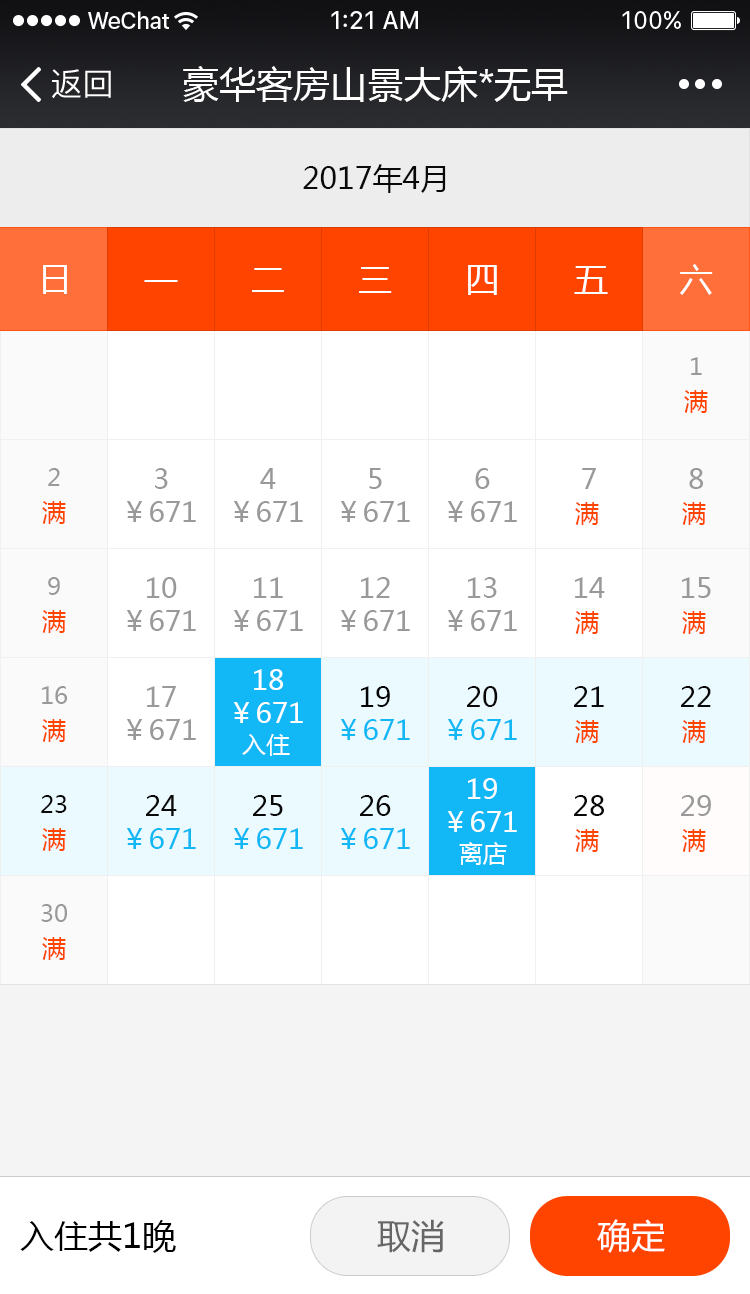
<style>
.page{position:relative;width:750px;height:1294px;background:#ffffff}
.page>*{position:absolute;margin:0}
.t1{font:32px "PingFangSC-Regular";color:#ffffff}
.t2{font:37px "MicrosoftYaHei";color:#ffffff}
.t3{font:30px "MicrosoftYaHei";color:#090909}
.t4{font:34px "MicrosoftYaHei";color:#ffffff}
.t5{font:24px "MicrosoftYaHei";color:#999999}
.t6{font:24px "MicrosoftYaHei";color:#ff4400}
.t7{font:28px "MicrosoftYaHei";color:#999999}
.t8{font:28px "MicrosoftYaHei";color:#ffffff}
.t9{font:28px "MicrosoftYaHei";color:#040404}
.t10{font:28px "MicrosoftYaHei";color:#090909}
.t11{font:28px "MicrosoftYaHei";color:#12b7f5}
.t12{font:24px "MicrosoftYaHei";color:#ffffff}
.t13{font:24px "MicrosoftYaHei";color:#090909}
.t14{font:34px "MicrosoftYaHei";color:#000000}
.t15{font:34px "MicrosoftYaHei";color:#666666}
</style>
<div class="page">
<p class="t1" style="left:52px;top:69px;width:59px;height:30px">返回</p>
<p class="t2" style="left:183px;top:66px;width:385px;height:36px">豪华客房山景大床*无早</p>
<p class="t3" style="left:303px;top:164px;width:143px;height:29px">2017年4月</p>
<p class="t4" style="left:43px;top:265px;width:24px;height:29px">日</p>
<p class="t4" style="left:252px;top:268px;width:32px;height:24px">二</p>
<p class="t4" style="left:359px;top:267px;width:33px;height:26px">三</p>
<p class="t4" style="left:468px;top:265px;width:29px;height:30px">四</p>
<p class="t4" style="left:574px;top:266px;width:34px;height:28px">五</p>
<p class="t4" style="left:680px;top:264px;width:33px;height:31px">六</p>
<p class="t4" style="left:144px;top:280px;width:34px;height:2px">一</p>
<p class="t5" style="left:691px;top:357px;width:11px;height:18px">1</p>
<p class="t6" style="left:684px;top:390px;width:24px;height:23px">满</p>
<p class="t5" style="left:48px;top:468px;width:12px;height:18px">2</p>
<p class="t7" style="left:155px;top:468px;width:13px;height:21px">3</p>
<p class="t7" style="left:260px;top:468px;width:16px;height:21px">4</p>
<p class="t7" style="left:369px;top:468px;width:13px;height:21px">5</p>
<p class="t7" style="left:475px;top:468px;width:15px;height:21px">6</p>
<p class="t7" style="left:582px;top:468px;width:14px;height:21px">7</p>
<p class="t7" style="left:689px;top:468px;width:14px;height:21px">8</p>
<p class="t6" style="left:42px;top:501px;width:24px;height:23px">满</p>
<p class="t7" style="left:126px;top:501px;width:70px;height:21px">￥671</p>
<p class="t7" style="left:233px;top:501px;width:70px;height:21px">￥671</p>
<p class="t7" style="left:340px;top:501px;width:70px;height:21px">￥671</p>
<p class="t7" style="left:447px;top:501px;width:70px;height:21px">￥671</p>
<p class="t6" style="left:575px;top:502px;width:24px;height:23px">满</p>
<p class="t6" style="left:682px;top:502px;width:24px;height:23px">满</p>
<p class="t5" style="left:48px;top:577px;width:12px;height:18px">9</p>
<p class="t7" style="left:147px;top:577px;width:30px;height:21px">10</p>
<p class="t7" style="left:254px;top:577px;width:29px;height:21px">11</p>
<p class="t7" style="left:361px;top:577px;width:29px;height:21px">12</p>
<p class="t7" style="left:468px;top:577px;width:29px;height:21px">13</p>
<p class="t7" style="left:575px;top:577px;width:30px;height:21px">14</p>
<p class="t7" style="left:682px;top:577px;width:29px;height:21px">15</p>
<p class="t6" style="left:42px;top:610px;width:24px;height:23px">满</p>
<p class="t7" style="left:126px;top:610px;width:70px;height:21px">￥671</p>
<p class="t7" style="left:233px;top:610px;width:70px;height:21px">￥671</p>
<p class="t7" style="left:340px;top:610px;width:70px;height:21px">￥671</p>
<p class="t7" style="left:447px;top:610px;width:70px;height:21px">￥671</p>
<p class="t6" style="left:575px;top:611px;width:24px;height:23px">满</p>
<p class="t6" style="left:682px;top:611px;width:24px;height:23px">满</p>
<p class="t8" style="left:254px;top:669px;width:29px;height:21px">18</p>
<p class="t5" style="left:42px;top:686px;width:25px;height:18px">16</p>
<p class="t7" style="left:147px;top:686px;width:29px;height:21px">17</p>
<p class="t9" style="left:361px;top:686px;width:29px;height:21px">19</p>
<p class="t10" style="left:467px;top:686px;width:31px;height:21px">20</p>
<p class="t10" style="left:574px;top:686px;width:30px;height:21px">21</p>
<p class="t10" style="left:681px;top:686px;width:30px;height:21px">22</p>
<p class="t8" style="left:233px;top:702px;width:70px;height:21px">￥671</p>
<p class="t6" style="left:42px;top:719px;width:24px;height:23px">满</p>
<p class="t7" style="left:126px;top:719px;width:70px;height:21px">￥671</p>
<p class="t11" style="left:340px;top:719px;width:70px;height:21px">￥671</p>
<p class="t11" style="left:447px;top:719px;width:70px;height:21px">￥671</p>
<p class="t6" style="left:575px;top:720px;width:24px;height:23px">满</p>
<p class="t6" style="left:682px;top:720px;width:24px;height:23px">满</p>
<p class="t12" style="left:242px;top:734px;width:48px;height:22px">入住</p>
<p class="t8" style="left:468px;top:778px;width:29px;height:21px">19</p>
<p class="t13" style="left:41px;top:795px;width:26px;height:18px">23</p>
<p class="t10" style="left:146px;top:795px;width:31px;height:21px">24</p>
<p class="t10" style="left:253px;top:795px;width:30px;height:21px">25</p>
<p class="t10" style="left:360px;top:795px;width:31px;height:21px">26</p>
<p class="t10" style="left:574px;top:795px;width:30px;height:21px">28</p>
<p class="t7" style="left:681px;top:795px;width:30px;height:21px">29</p>
<p class="t8" style="left:447px;top:811px;width:70px;height:21px">￥671</p>
<p class="t6" style="left:42px;top:828px;width:24px;height:23px">满</p>
<p class="t11" style="left:126px;top:828px;width:70px;height:21px">￥671</p>
<p class="t11" style="left:233px;top:828px;width:70px;height:21px">￥671</p>
<p class="t11" style="left:340px;top:828px;width:70px;height:21px">￥671</p>
<p class="t6" style="left:575px;top:829px;width:24px;height:23px">满</p>
<p class="t6" style="left:682px;top:829px;width:24px;height:23px">满</p>
<p class="t12" style="left:459px;top:842px;width:48px;height:23px">离店</p>
<p class="t5" style="left:41px;top:904px;width:26px;height:18px">30</p>
<p class="t6" style="left:42px;top:937px;width:24px;height:23px">满</p>
<p class="t14" style="left:20px;top:1220px;width:156px;height:33px">入住共1晚</p>
<p class="t15" style="left:377px;top:1219px;width:67px;height:34px">取消</p>
<p class="t4" style="left:597px;top:1219px;width:68px;height:34px">确定</p>
</div>
